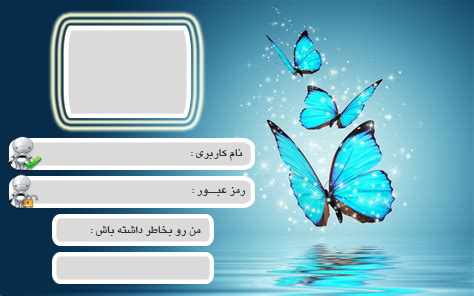
<style>
.page{position:relative;width:474px;height:296px}
.page>*{position:absolute;margin:0}
.t1{font:12px "BYagutBold";color:#333333}
.t2{font:11.7px "BYagutBold";color:#333333}
</style>
<div class="page">
<p class="t1" style="left:191px;top:149px;width:52px;height:12px">: نام کاربری</p>
<p class="t2" style="left:192px;top:187px;width:53px;height:9px">: رمز عبــور</p>
<p class="t1" style="left:91px;top:226px;width:110px;height:10px">: من رو بخاطر داشته باش</p>
</div>
